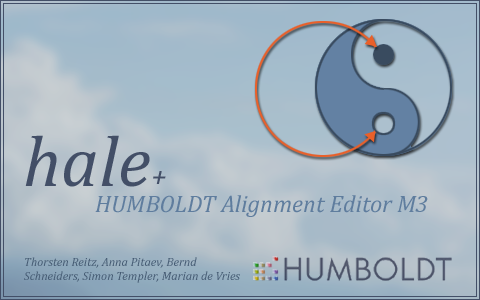
<style>
.page{position:relative;width:480px;height:300px}
.page>*{position:absolute;margin:0}
.t1{font:72px "Cambria-Italic";color:#434f67}
.t2{font:30px "Cambria-Italic";color:#434f67}
.t3{font:24px "Cambria-Italic";color:#5f7d9e}
.t4{font:12px "Cambria-Italic";color:#455b73}
</style>
<div class="page">
<p class="t1" style="left:25px;top:135px;width:141px;height:52px">hale<span class="t2">+</span></p>
<p class="t3" style="left:95px;top:195px;width:333px;height:22px">HUMBOLDT Alignment Editor M3</p>
<p class="t4" style="left:24px;top:257px;width:216px;height:26px">Thorsten Reitz, Anna Pitaev, Bernd <br>Schneiders, Simon Templer, Marian de Vries</p>
</div>
